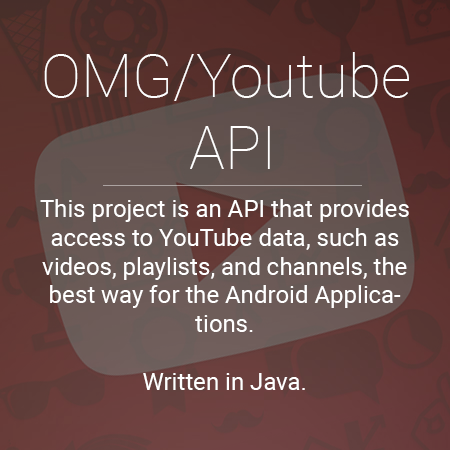
<style>
.page{position:relative;width:450px;height:450px}
.page>*{position:absolute;margin:0}
.t1{font:60px "Roboto-Thin";color:#ffffff}
.t2{font:24px "Roboto-Regular";color:#ffffff}
</style>
<div class="page">
<p class="t1" style="left:44px;top:52px;width:365px;height:117px;text-align:center">OMG/Youtube <br>API</p>
<p class="t2" style="left:40px;top:199px;width:369px;height:191px;text-align:center">This project is an API that provides access to YouTube data, such as videos, playlists, and channels, the best way for the Android Applications. <br><br>Written in Java.</p>
</div>
